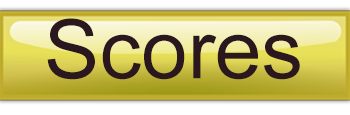
<style>
.page{position:relative;width:350px;height:115px}
.page>*{position:absolute;margin:0}
.t1{font:82px "ArialMT";color:#2a181e}
</style>
<div class="page">
<p class="t1" style="left:47px;top:18px;width:253px;height:62px">Scores Cha</p>
</div>
